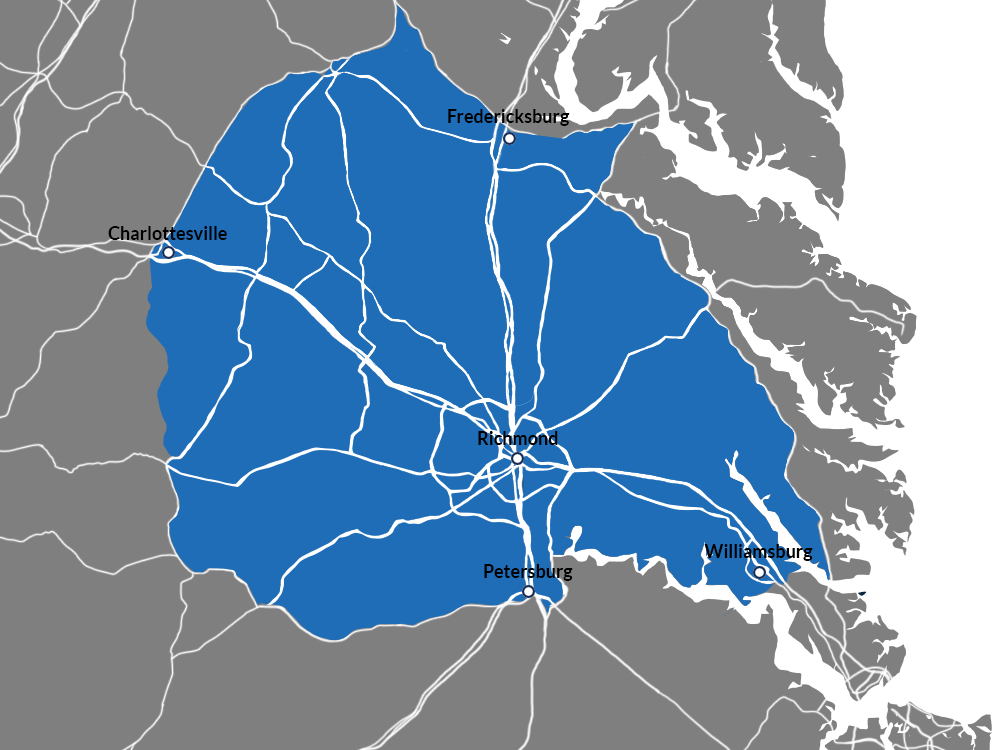
<style>
.page{position:relative;width:992px;height:750px;background:#7f7f7f}
.page>*{position:absolute;margin:0}
.t1{font:18px "Lato-Bold";color:#000000}
</style>
<div class="page">
<p class="t1" style="left:448px;top:109px;width:122px;height:17px">Fredericksburg</p>
<p class="t1" style="left:108px;top:226px;width:119px;height:14px">Charlottesville</p>
<p class="t1" style="left:478px;top:431px;width:80px;height:14px">Richmond</p>
<p class="t1" style="left:704px;top:544px;width:109px;height:17px">Williamsburg</p>
<p class="t1" style="left:484px;top:564px;width:89px;height:17px">Petersburg</p>
</div>
